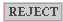
<style>
.page{position:relative;width:63px;height:22px;background:#cfcece}
.page>*{position:absolute;margin:0}
.t1{font:14px "NuevaStd-Bold";color:#4b4b4b}
</style>
<div class="page">
<p class="t1" style="left:9px;top:7px;width:8px;height:9px">R</p>
<p class="t1" style="left:18px;top:7px;width:15px;height:9px">EJ</p>
<p class="t1" style="left:34px;top:7px;width:15px;height:9px">EC</p>
<p class="t1" style="left:50px;top:7px;width:8px;height:9px">T</p>
</div>
